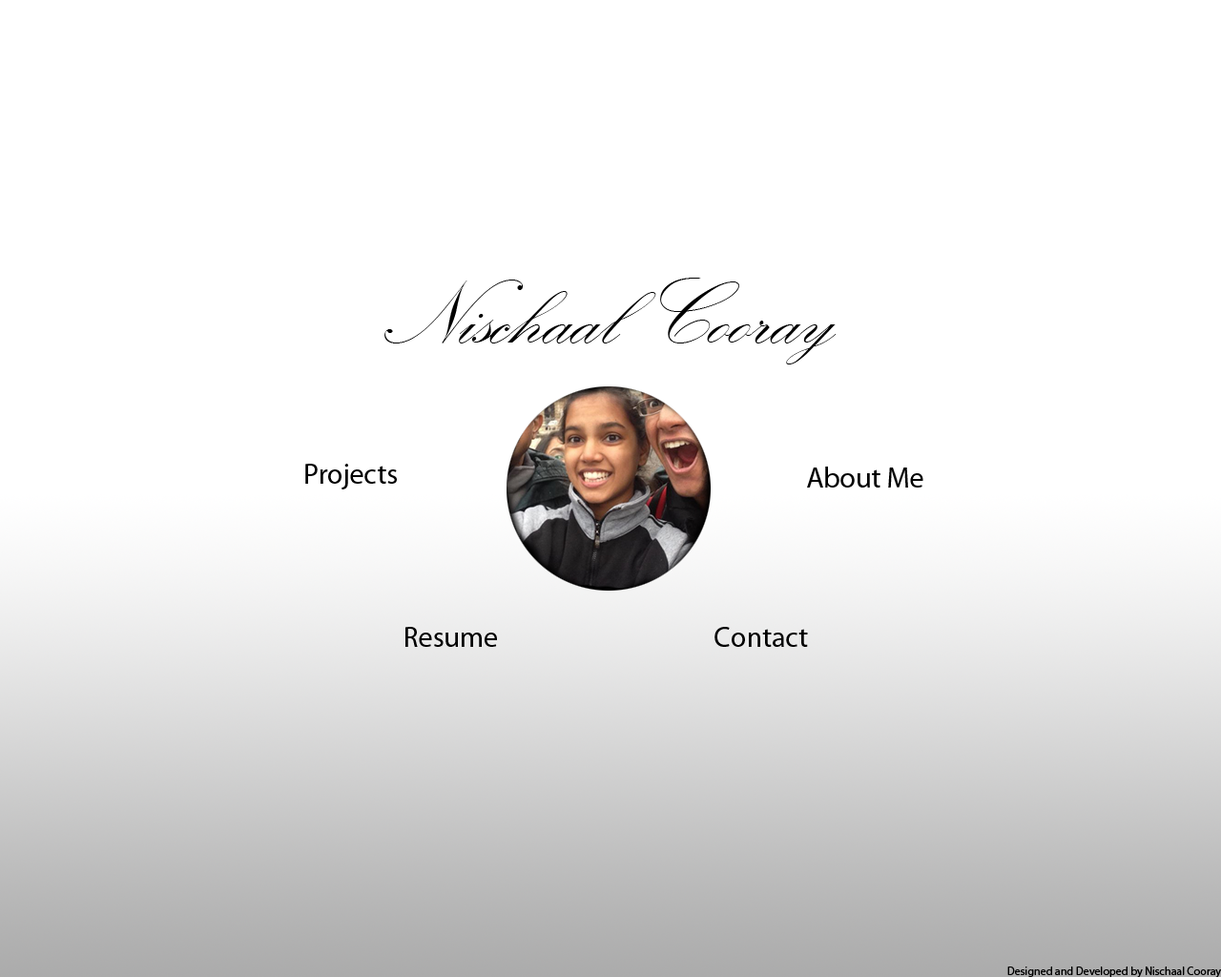
<style>
.page{position:relative;width:1221px;height:977px;background:#ffffff}
.page>*{position:absolute;margin:0}
.t1{font:95.4px "KunstlerScript";color:#000000}
.t2{font:28.6px "MyriadPro-Regular";color:#000000}
.t3{font:11.4px "MyriadPro-Regular";color:#000000}
</style>
<div class="page">
<p class="t1" style="left:384px;top:278px;width:452px;height:86px">Nischaal Cooray</p>
<p class="t2" style="left:305px;top:464px;width:92px;height:25px">Projects</p>
<p class="t2" style="left:807px;top:466px;width:116px;height:21px">About Me</p>
<p class="t2" style="left:405px;top:627px;width:92px;height:20px">Resume</p>
<p class="t2" style="left:714px;top:627px;width:94px;height:20px">Contact</p>
<p class="t3" style="left:1007px;top:966px;width:214px;height:12px">Designed and Developed by Nischaal Cooray</p>
</div>
